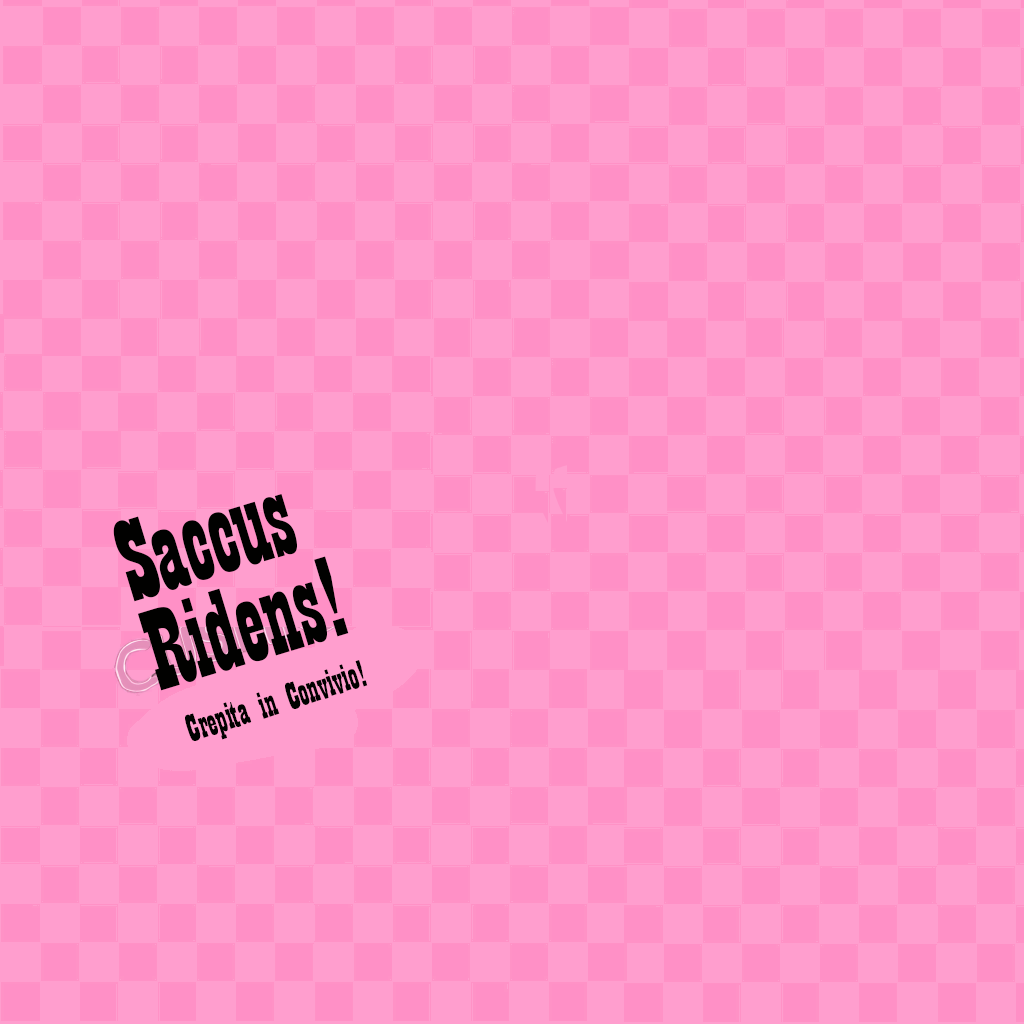
<style>
.page{position:relative;width:1024px;height:1024px;background:#ff9ece}
.page>*{position:absolute;margin:0}
.t1{font:120px/93.3px "Playbill";color:#010100}
.t2{font:40px "Playbill";color:#010100}
</style>
<div class="page">
<p class="t1" style="left:113px;top:494px;width:236px;height:197px;rotate:-17deg">Saccus<br>Ridens!</p>
<p class="t2" style="left:185px;top:660px;width:183px;height:81px;rotate:-18deg">Crepita in Convivio!</p>
</div>
